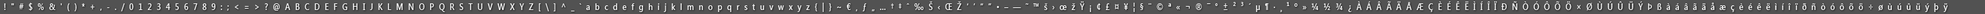
<style>
.page{position:relative;width:1985px;height:14px;background:#525252}
.page>*{position:absolute;margin:0}
.t1{font:9px "SegoeUI-SemiBold";letter-spacing:0.6em;color:#ffffff;scale:0.88 1}
</style>
<div class="page">
<p class="t1" style="left:4px;top:1px;width:1943px;height:11px">!"#$%&amp;'()*+,-./0123456789:;&lt;=&gt;?@ABCDEFGHIJKLMNOPQRSTUVWXYZ[\]^_`abcdefghijklmnopqrstuvwxyz{|}~€‚ƒ„…†‡ˆ‰Š‹ŒŽ‘’“”•–—˜™š›œžŸ¡¢£¤¥¦§¨©ª«¬®¯°±²³´µ¶·¸¹º»¼½¾¿ÀÁÂÃÄÅÆÇÈÉÊËÌÍÎÏÐÑÒÓÔÕÖ×ØÙÚÛÜÝÞßàáâãäåæçèéêëìíîïðñòóôõö÷øùúûüýþÿ</p>
</div>
